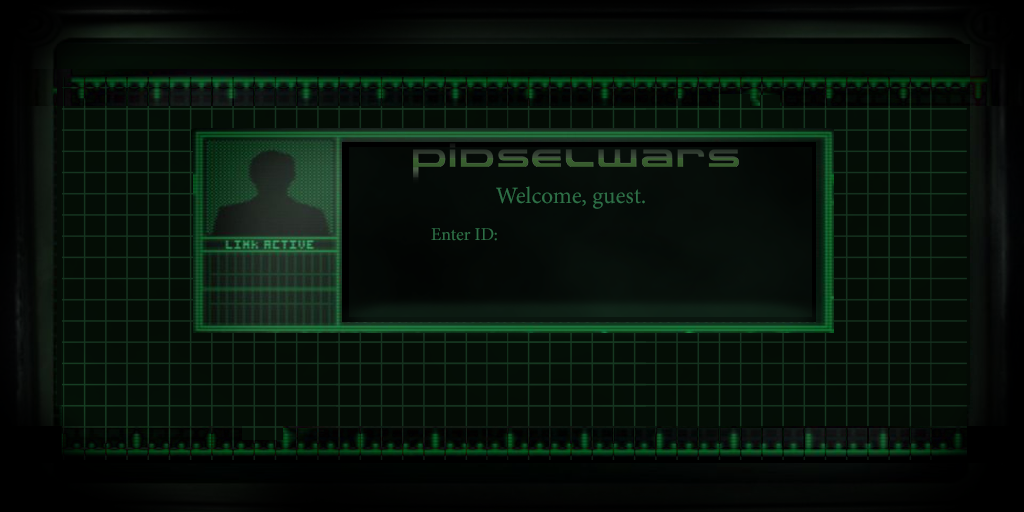
<style>
.page{position:relative;width:1024px;height:512px}
.page>*{position:absolute;margin:0}
.t1{font:23.3px "MinionPro-Regular";color:#2e7047}
.t2{font:18px "MinionPro-Regular";color:#2e7047}
</style>
<div class="page">
<p class="t1" style="left:496px;top:186px;width:149px;height:23px">Welcome, guest.</p>
<p class="t2" style="left:431px;top:228px;width:66px;height:13px">Enter ID:</p>
</div>
